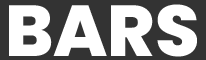
<style>
.page{position:relative;width:206px;height:60px;background:#ffffff}
.page>*{position:absolute;margin:0}
.t1{font:72px "Poppins-ExtraBold";color:#ffffff}
</style>
<div class="page">
<p class="t1" style="left:9px;top:4px;width:188px;height:53px">BARS</p>
</div>
